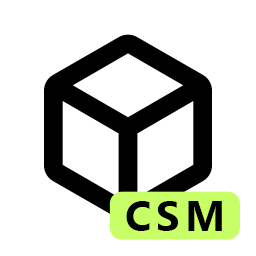
<style>
.page{position:relative;width:256px;height:256px;background:#ffffff}
.page>*{position:absolute;margin:0}
.t1{font:42px "SegoeUI-Bold";letter-spacing:0.12em;color:#000000}
</style>
<div class="page">
<p class="t1" style="left:126px;top:201px;width:96px;height:30px">CSM</p>
</div>
